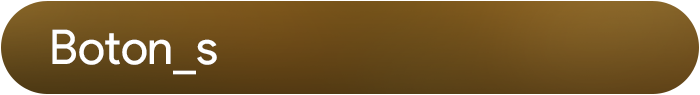
<style>
.page{position:relative;width:700px;height:95px}
.page>*{position:absolute;margin:0}
.t1{font:48px "ProductSans-Regular";color:#ffffff}
</style>
<div class="page">
<p class="t1" style="left:52px;top:29px;width:165px;height:46px">Boton_s</p>
</div>
